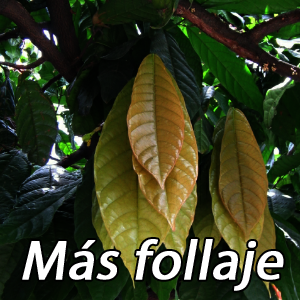
<style>
.page{position:relative;width:300px;height:300px}
.page>*{position:absolute;margin:0}
.t1{font:55.6px "MyriadPro-Regular";color:#ffffff;font-weight:bold;font-style:italic}
</style>
<div class="page">
<p class="t1" style="left:22px;top:239px;width:262px;height:52px">Más follaje</p>
</div>
